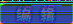
<style>
.page{position:relative;width:73px;height:24px}
.page>*{position:absolute;margin:0}
.t1{font:17px "FZKATJW--GB1-0"}
</style>
<div class="page">
<p class="t1" style="left:16px;top:4px;width:39px;height:16px">编  辑</p>
</div>
